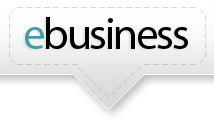
<style>
.page{position:relative;width:214px;height:126px;background:#ffffff}
.page>*{position:absolute;margin:0}
.t1{font:45px "MyriadPro-Regular";letter-spacing:-0.05em;color:#000000}
.t2{font:45px "MyriadPro-Regular";letter-spacing:-0.05em;color:#479ba8}
</style>
<div class="page">
<p class="t1" style="left:25px;top:17px;width:163px;height:32px"><span class="t2">e</span>business</p>
</div>
